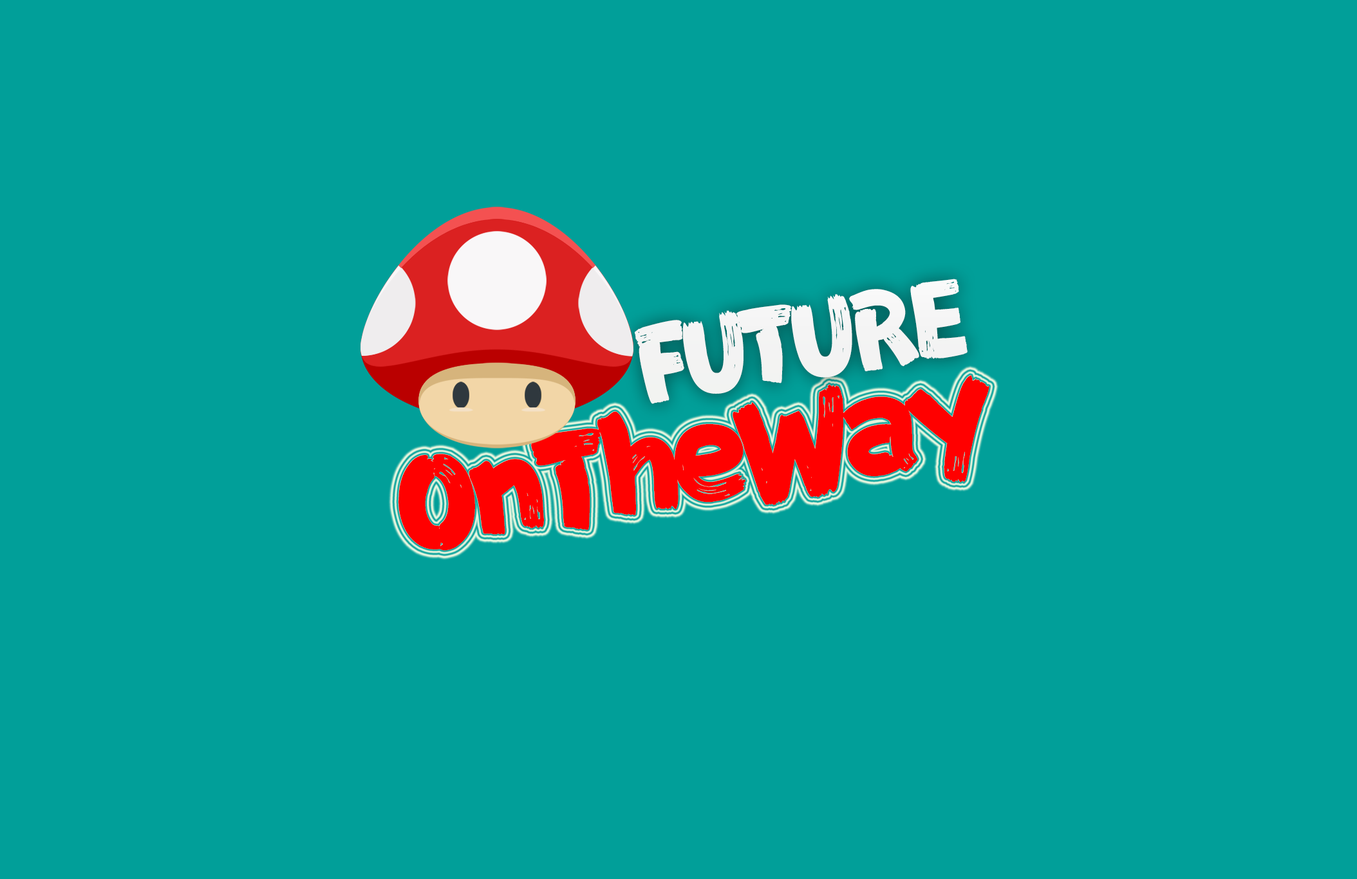
<style>
.page{position:relative;width:1357px;height:879px;background:#019f99}
.page>*{position:absolute;margin:0}
.t1{font:96.5px "FZFENSTXJW--GB1-0";letter-spacing:-0.08em;color:#ffffff}
.t2{font:124.8px "FZFENSTXJW--GB1-0";letter-spacing:-0.08em;color:#ff0000}
</style>
<div class="page">
<p class="t1" style="left:634px;top:279px;width:333px;height:125px;rotate:-9deg">FUTURE</p>
<p class="t2" style="left:398px;top:375px;width:591px;height:176px;rotate:-9deg">OnTheWay</p>
</div>
